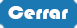
<style>
.page{position:relative;width:77px;height:28px;background:#1b78b3}
.page>*{position:absolute;margin:0}
.t1{font:20.3px "Bauhaus93";color:#ffffff}
</style>
<div class="page">
<p class="t1" style="left:8px;top:6px;width:60px;height:13px">Cerrar</p>
</div>
